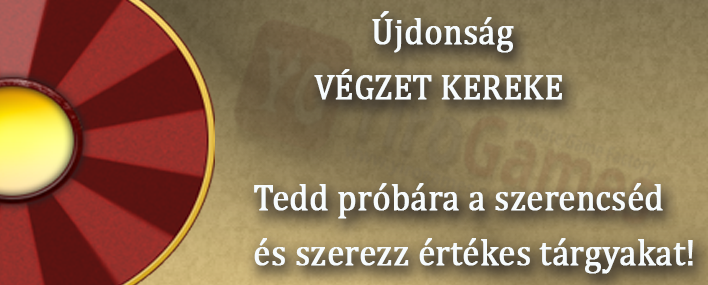
<style>
.page{position:relative;width:708px;height:285px}
.page>*{position:absolute;margin:0}
.t1{font:36.8px "Cambria";color:#f6fbfd;font-weight:bold;scale:0.92 1}
.t2{font:35.2px "Cambria";color:#f6fbfd;font-weight:bold;scale:0.92 1}
</style>
<div class="page">
<p class="t1" style="left:254px;top:11px;width:439px;height:263px">Újdonság<br> <span class="t2">   VÉGZET KEREKE<br></span><br>Tedd próbára a szerencséd<br>és szerezz értékes tárgyakat!</p>
</div>
